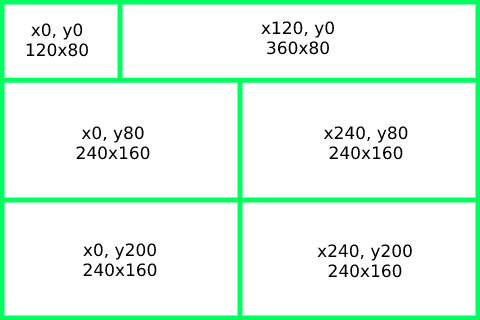
<style>
.page{position:relative;width:480px;height:320px;background:#ffffff}
.page>*{position:absolute;margin:0}
.t1{font:17px "DejaVuSans";color:#000000}
</style>
<div class="page">
<p class="t1" style="left:26px;top:23px;width:62px;height:34px;text-align:center">x0, y0<br>120x80</p>
<p class="t1" style="left:261px;top:21px;width:73px;height:34px;text-align:center">x120, y0<br>360x80</p>
<p class="t1" style="left:76px;top:126px;width:74px;height:34px;text-align:center">x0, y80<br>240x160</p>
<p class="t1" style="left:323px;top:126px;width:85px;height:34px;text-align:center">x240, y80<br>240x160</p>
<p class="t1" style="left:83px;top:243px;width:74px;height:34px;text-align:center">x0, y200<br>240x160</p>
<p class="t1" style="left:317px;top:244px;width:95px;height:34px;text-align:center">x240, y200<br>240x160</p>
</div>
